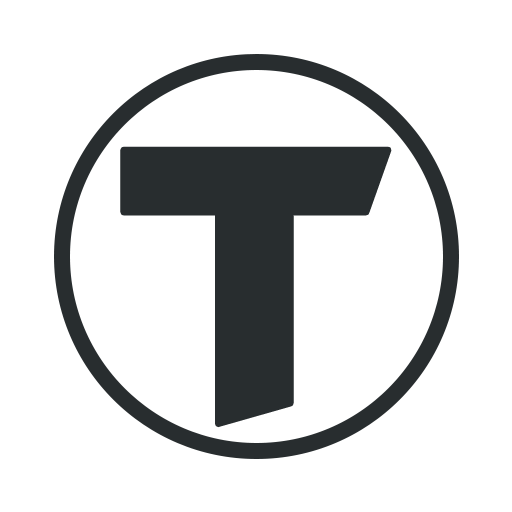
<style>
.page{position:relative;width:512px;height:512px;background:#ffffff}
.page>*{position:absolute;margin:0}
.t1{font:400px "JLinXin";color:#282d2f}
</style>
<div class="page">
<p class="t1" style="left:123px;top:149px;width:266px;height:276px">T</p>
</div>
